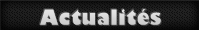
<style>
.page{position:relative;width:199px;height:30px}
.page>*{position:absolute;margin:0}
.t1{font:21.3px "GillSans-UltraBold";color:#d1d1d1;scale:0.89 1}
</style>
<div class="page">
<p class="t1" style="left:39px;top:8px;width:122px;height:17px">Actualités</p>
</div>
